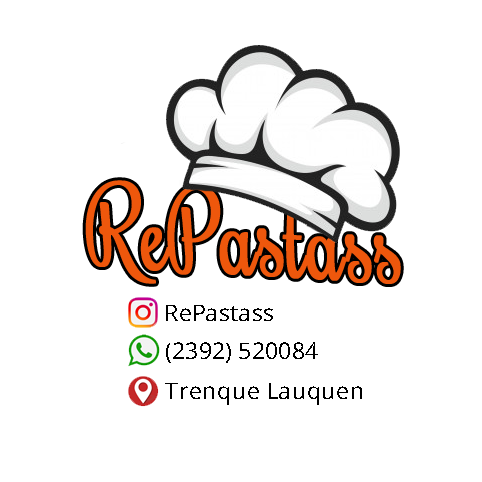
<style>
.page{position:relative;width:482px;height:482px;background:#ffffff}
.page>*{position:absolute;margin:0}
.t1{font:105.9px "Rochester-Regular";color:#ee570c;font-weight:bold;scale:0.78 1}
.t2{font:22.7px "OpenSans";color:#000000}
.t3{font:29.2px "OpenSans";color:#000000}
</style>
<div class="page">
<p class="t1" style="left:85px;top:180px;width:316px;height:104px;rotate:3deg">RePastass</p>
<p class="t2" style="left:166px;top:305px;width:107px;height:16px"><span class="t3"> </span>RePastass</p>
<p class="t2" style="left:166px;top:342px;width:152px;height:21px">(2392) 520084</p>
<p class="t2" style="left:165px;top:383px;width:197px;height:22px">Trenque Lauquen</p>
</div>
